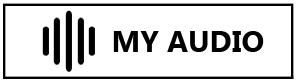
<style>
.page{position:relative;width:296px;height:82px;background:#ffffff}
.page>*{position:absolute;margin:0}
.t1{font:30px "Ebrima-Bold";color:#000000}
</style>
<div class="page">
<p class="t1" style="left:113px;top:31px;width:151px;height:21px">MY AUDIO</p>
</div>
